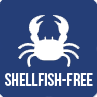
<style>
.page{position:relative;width:97px;height:97px;background:#253e77}
.page>*{position:absolute;margin:0}
.t1{font:18px "BebasNeue";color:#ffffff}
</style>
<div class="page">
<p class="t1" style="left:5px;top:73px;width:88px;height:13px">Shellfish-free</p>
</div>
